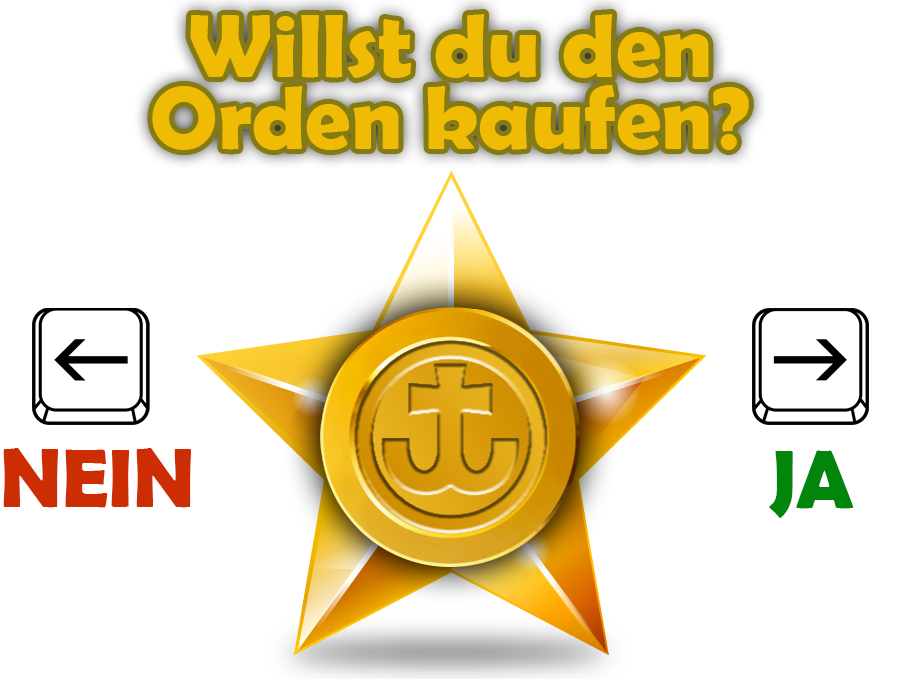
<style>
.page{position:relative;width:900px;height:700px;background:#ffffff}
.page>*{position:absolute;margin:0}
.t1{font:90.1px/72.1px "BerlinSansFBDemi-Bold";color:#f0bb05}
.t2{font:82.7px "BerlinSansFBDemi-Bold";color:#cd2d02}
.t3{font:82.7px "BerlinSansFBDemi-Bold";color:#01850a}
</style>
<div class="page">
<p class="t1" style="left:152px;top:14px;width:597px;height:136px;text-align:center">Willst du den<br>Orden kaufen?</p>
<p class="t2" style="left:3px;top:448px;width:188px;height:60px">NEIN</p>
<p class="t3" style="left:769px;top:450px;width:85px;height:68px">JA</p>
</div>
